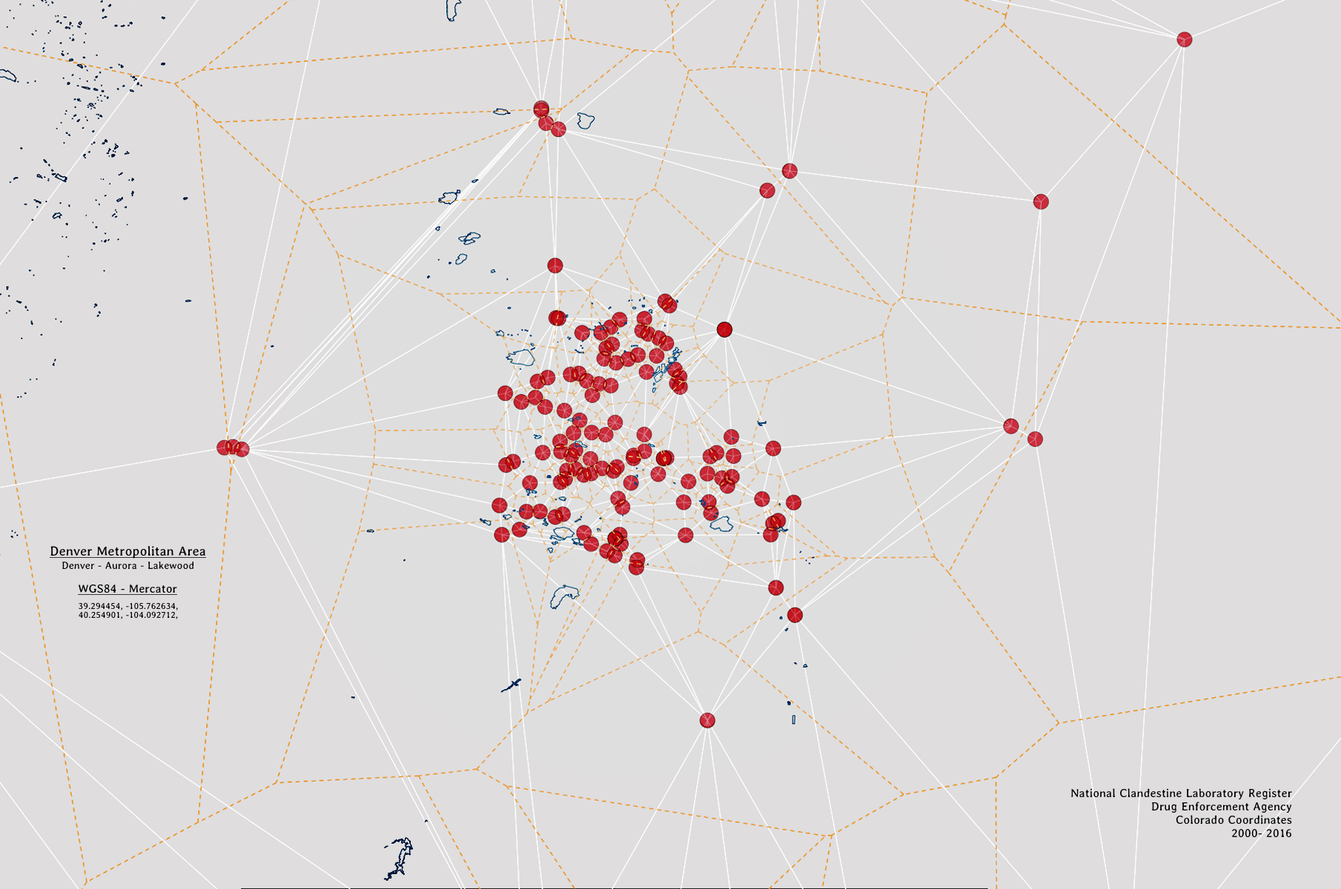
<style>
.page{position:relative;width:1341px;height:889px;background:#dfdddd}
.page>*{position:absolute;margin:0}
.t1{font:10.4px/13.3px "Averia-Regular";color:#000000}
.t2{font:13.3px/13.3px "Averia-Regular";color:#000000;text-decoration:underline}
.t3{font:11.9px "Averia-Regular";color:#000000;text-decoration:underline}
.t4{font:8.9px/8.9px "Averia-Regular";color:#000000}
.t5{font:11.9px/13.3px "Averia-Regular";color:#000000}
</style>
<div class="page">
<p class="t1" style="left:50px;top:546px;width:156px;height:23px;text-align:center"><span class="t2">Denver Metropolitan Area<br></span>Denver - Aurora - Lakewood</p>
<p class="t3" style="left:78px;top:584px;width:99px;height:11px">WGS84 - Mercator</p>
<p class="t4" style="left:79px;top:603px;width:99px;height:17px;text-align:center">39.294454, -105.762634, <br>40.254901, -104.092712,</p>
<p class="t5" style="left:1071px;top:789px;width:221px;height:49px;text-align:right">National Clandestine Laboratory Register<br>Drug Enforcement Agency<br>Colorado Coordinates<br>2000- 2016</p>
</div>
